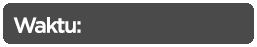
<style>
.page{position:relative;width:257px;height:47px;background:#4a4a4a}
.page>*{position:absolute;margin:0}
.t1{font:21.4px "iCielGotham-Medium";letter-spacing:-0.06em;color:#ffffff}
</style>
<div class="page">
<p class="t1" style="left:13px;top:17px;width:68px;height:16px">Waktu:</p>
</div>
